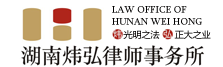
<style>
.page{position:relative;width:223px;height:67px;background:#ffffff}
.page>*{position:absolute;margin:0}
.t1{font:10px "Sylfaen";color:#010000}
.t2{font:9px "MicrosoftYaHei"}
</style>
<div class="page">
<p class="t1" style="left:112px;top:6px;width:90px;height:19px">LAW OFFICE OF<br>HUNAN WEI HONG</p>
<p class="t2" style="left:123px;top:30px;width:37px;height:9px">光明之法</p>
<p class="t2" style="left:174px;top:30px;width:37px;height:9px">正大之业</p>
</div>
